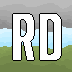
<style>
.page{position:relative;width:72px;height:72px;background:#ffffff}
.page>*{position:absolute;margin:0}
.t1{font:62.5px "BigNoodleTitling";letter-spacing:0.03em;color:#ffffff;font-weight:bold}
</style>
<div class="page">
<p class="t1" style="left:13px;top:14px;width:48px;height:46px">RD</p>
</div>
